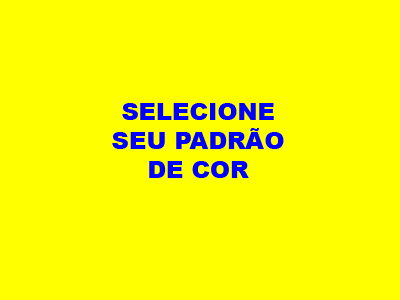
<style>
.page{position:relative;width:400px;height:300px;background:#ffff00}
.page>*{position:absolute;margin:0}
.t1{font:24px "Arial-Black";color:#0000ff}
</style>
<div class="page">
<p class="t1" style="left:112px;top:103px;width:172px;height:75px;text-align:center">SELECIONE<br>SEU PADRÃO<br>DE COR</p>
</div>
